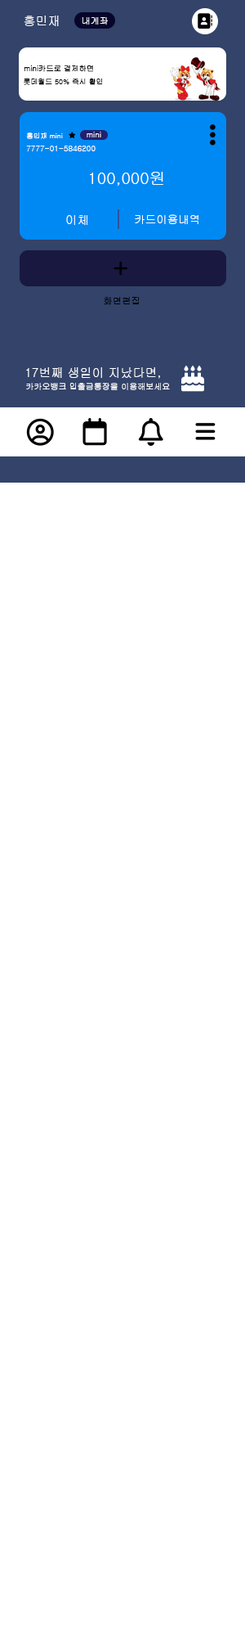
<style>
.page{position:relative;width:245px;height:1636px;background:#ffffff}
.page>*{position:absolute;margin:0}
.t1{font:12.3px "Gulim";color:#ffffff}
.t2{font:9px "Gulim";color:#ffffff}
.t3{font:7.6px "Gulim";color:#000000}
.t4{font:7.3px "Gulim";color:#000000}
.t5{font:6.9px "Gulim";color:#ffffff}
.t6{font:7.8px "Gulim";color:#ffffff}
.t7{font:8px "Gulim";color:#ffffff}
.t8{font:16.4px "Gulim";color:#ffffff}
.t9{font:12.1px "Gulim";color:#ffffff}
.t10{font:11px "Gulim";color:#ffffff}
.t11{font:9.4px "Gulim";color:#000000}
.t12{font:8.2px "Gulim";color:#ffffff}
</style>
<div class="page">
<p class="t1" style="left:24px;top:16px;width:35px;height:10px">홍민재</p>
<p class="t2" style="left:83px;top:17px;width:25px;height:8px">내계좌</p>
<p class="t3" style="left:24px;top:65px;width:69px;height:7px">mini카드로 결제하면</p>
<p class="t4" style="left:24px;top:78px;width:79px;height:7px">롯데월드 50% 즉시 활인</p>
<p class="t5" style="left:26px;top:133px;width:37px;height:6px">홍민재 mini</p>
<p class="t6" style="left:87px;top:132px;width:14px;height:5px">mini</p>
<p class="t7" style="left:26px;top:146px;width:70px;height:5px">7777-01-5846200</p>
<p class="t8" style="left:90px;top:172px;width:74px;height:14px">100,000원</p>
<p class="t9" style="left:66px;top:215px;width:22px;height:10px">이체</p>
<p class="t10" style="left:135px;top:214px;width:64px;height:10px">카드이용내역</p>
<p class="t11" style="left:104px;top:297px;width:35px;height:8px">화면편집</p>
<p class="t1" style="left:26px;top:367px;width:134px;height:12px">17번째 생일이 지났다면,</p>
<p class="t12" style="left:26px;top:383px;width:144px;height:7px">카카오뱅크 입출금통장을 이용해보세요</p>
</div>
